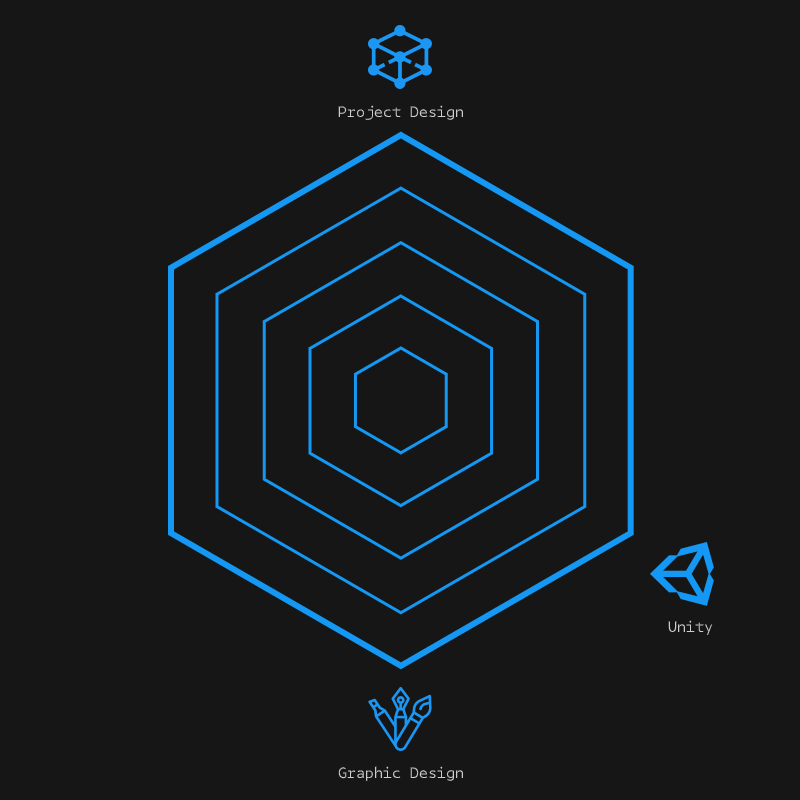
<style>
.page{position:relative;width:800px;height:800px;background:#161616}
.page>*{position:absolute;margin:0}
.t1{font:15px "BPmono";color:#cdcdcd}
</style>
<div class="page">
<p class="t1" style="left:338px;top:105px;width:125px;height:15px">Project Design</p>
<p class="t1" style="left:668px;top:620px;width:45px;height:16px">Unity</p>
<p class="t1" style="left:338px;top:766px;width:125px;height:15px">Graphic Design</p>
</div>
